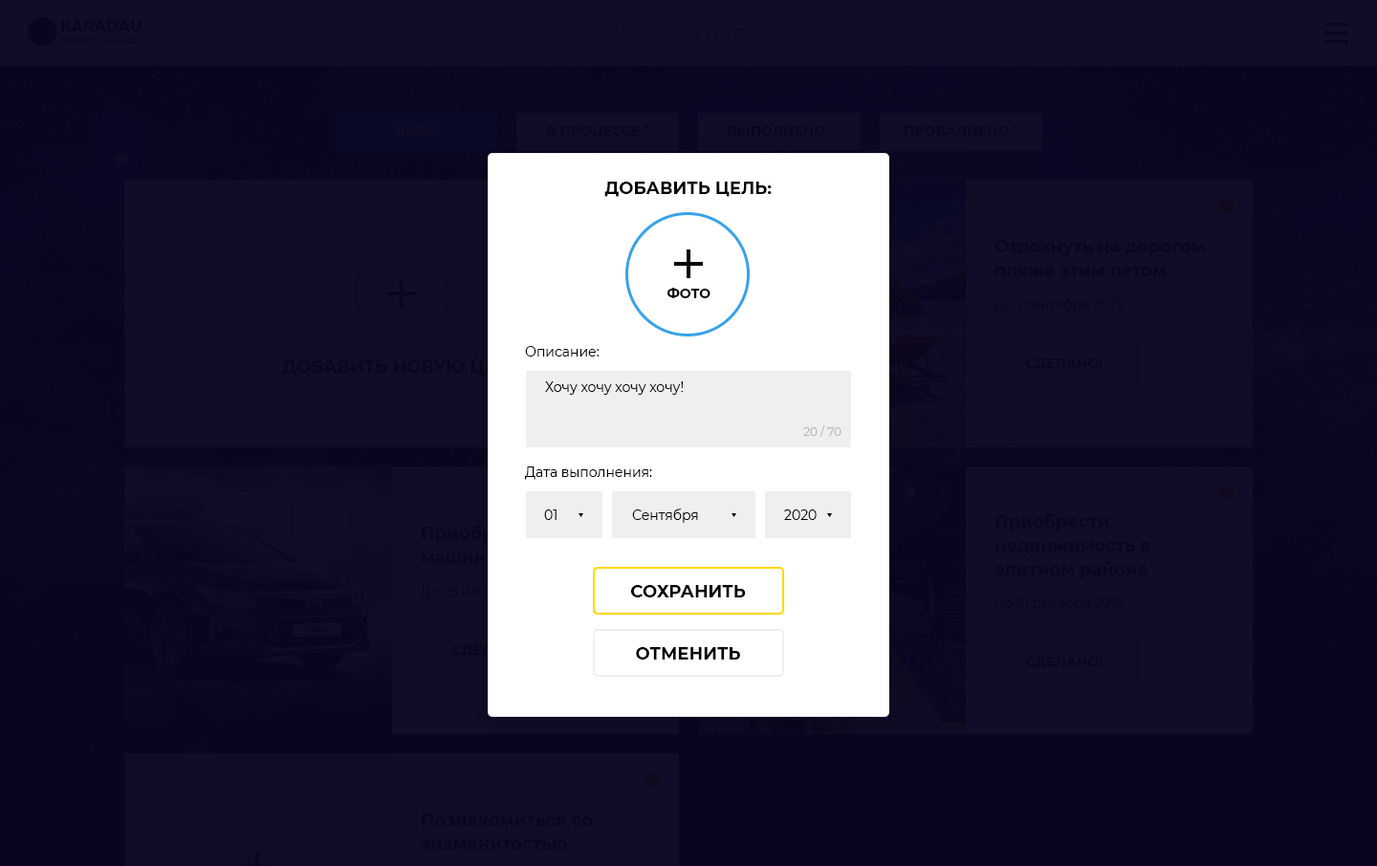
<style>
.page{position:relative;width:1377px;height:866px;background:#110c27}
.page>*{position:absolute;margin:0}
.t1{font:17.2px "Montserrat-Bold";color:#000000;text-transform:uppercase}
.t2{font:13.4px "Montserrat-Bold";color:#000000;text-transform:uppercase}
.t3{font:13.4px "Montserrat-Regular";color:#010101}
.t4{font:11.5px "Montserrat-Regular";color:#b3b3b3}
.t5{font:17.2px "Montserrat-Bold";color:#010101;text-transform:uppercase}
</style>
<div class="page">
<p class="t1" style="left:604px;top:182px;width:168px;height:15px">Добавить цель:</p>
<p class="t2" style="left:666px;top:288px;width:44px;height:10px">фото</p>
<p class="t3" style="left:525px;top:346px;width:74px;height:11px">Описание:</p>
<p class="t3" style="left:545px;top:381px;width:139px;height:14px">Хочу хочу хочу хочу!</p>
<p class="t4" style="left:803px;top:425px;width:38px;height:12px">20 / 70</p>
<p class="t3" style="left:525px;top:467px;width:127px;height:13px">Дата выполнения:</p>
<p class="t3" style="left:544px;top:510px;width:12px;height:10px">01</p>
<p class="t3" style="left:632px;top:509px;width:66px;height:14px">Сентября</p>
<p class="t3" style="left:784px;top:510px;width:32px;height:10px">2020</p>
<p class="t5" style="left:631px;top:585px;width:115px;height:13px">сохранить</p>
<p class="t5" style="left:636px;top:647px;width:104px;height:13px">отменить</p>
</div>
